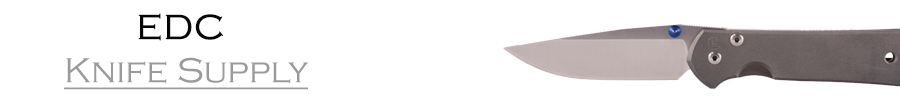
<style>
.page{position:relative;width:900px;height:100px;background:#ffffff}
.page>*{position:absolute;margin:0}
.t1{font:36px "CopperplateGothic-Light";color:#9b9999;text-decoration:underline}
.t2{font:36px "CopperplateGothic-Light";color:#050505;font-weight:bold}
</style>
<div class="page">
<p class="t1" style="left:64px;top:13px;width:245px;height:77px;text-align:center"><span class="t2">EDC <br></span>Knife Supply</p>
</div>
